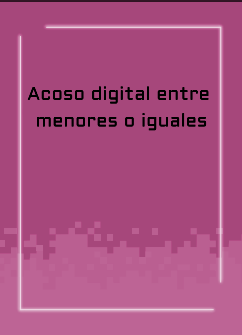
<style>
.page{position:relative;width:242px;height:335px;background:#a6477b}
.page>*{position:absolute;margin:0}
.t1{font:18.3px/26.7px "Aldrich-Regular";letter-spacing:0.015em;color:#000000}
</style>
<div class="page">
<p class="t1" style="left:27px;top:86px;width:182px;height:45px;text-align:center">Acoso digital entre <br>menores o iguales</p>
</div>
